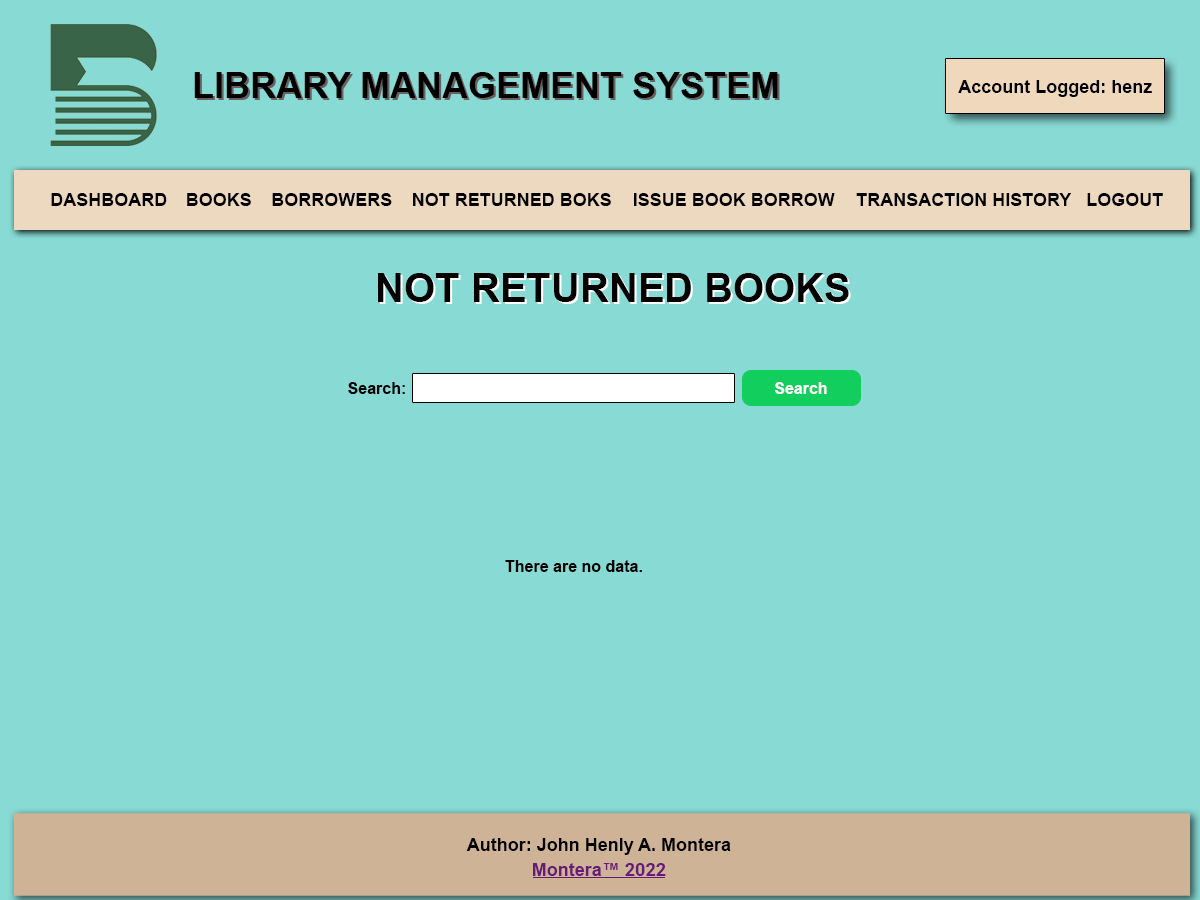
<style>
.page{position:relative;width:1200px;height:900px;background:#88dad4}
.page>*{position:absolute;margin:0}
.t1{font:36px "Arial-BoldMT";color:#000000}
.t2{font:18px "Arial-BoldMT";color:#000000}
.t3{font:40px "Arial-BoldMT";color:#000000}
.t4{font:16px "Arial-BoldMT";color:#000000}
.t5{font:16px "Arial-BoldMT";color:#ffffff}
.t6{font:18px "Arial-BoldMT";color:#681a79}
.t7{font:18px "Roboto-Bold";color:#681a79}
</style>
<div class="page">
<p class="t1" style="left:194px;top:72px;width:584px;height:26px">LIBRARY MANAGEMENT SYSTEM</p>
<p class="t2" style="left:958px;top:80px;width:194px;height:17px">Account Logged: henz</p>
<p class="t2" style="left:51px;top:193px;width:116px;height:13px">DASHBOARD</p>
<p class="t2" style="left:187px;top:193px;width:64px;height:13px">BOOKS</p>
<p class="t2" style="left:272px;top:193px;width:120px;height:13px">BORROWERS</p>
<p class="t2" style="left:413px;top:193px;width:198px;height:13px">NOT RETURNED BOKS</p>
<p class="t2" style="left:634px;top:193px;width:201px;height:13px">ISSUE BOOK BORROW</p>
<p class="t2" style="left:856px;top:193px;width:216px;height:13px">TRANSACTION HISTORY</p>
<p class="t2" style="left:1087px;top:193px;width:76px;height:13px">LOGOUT</p>
<p class="t3" style="left:378px;top:273px;width:471px;height:29px">NOT RETURNED BOOKS</p>
<p class="t4" style="left:348px;top:382px;width:57px;height:12px">Search:</p>
<p class="t5" style="left:775px;top:382px;width:52px;height:12px">Search</p>
<p class="t4" style="left:505px;top:560px;width:137px;height:12px">There are no data.</p>
<p class="t2" style="left:466px;top:838px;width:265px;height:17px">Author: John Henly A. Montera</p>
<p class="t6" style="left:533px;top:863px;width:133px;height:13px">Montera™ <span class="t7">2022</span></p>
</div>
